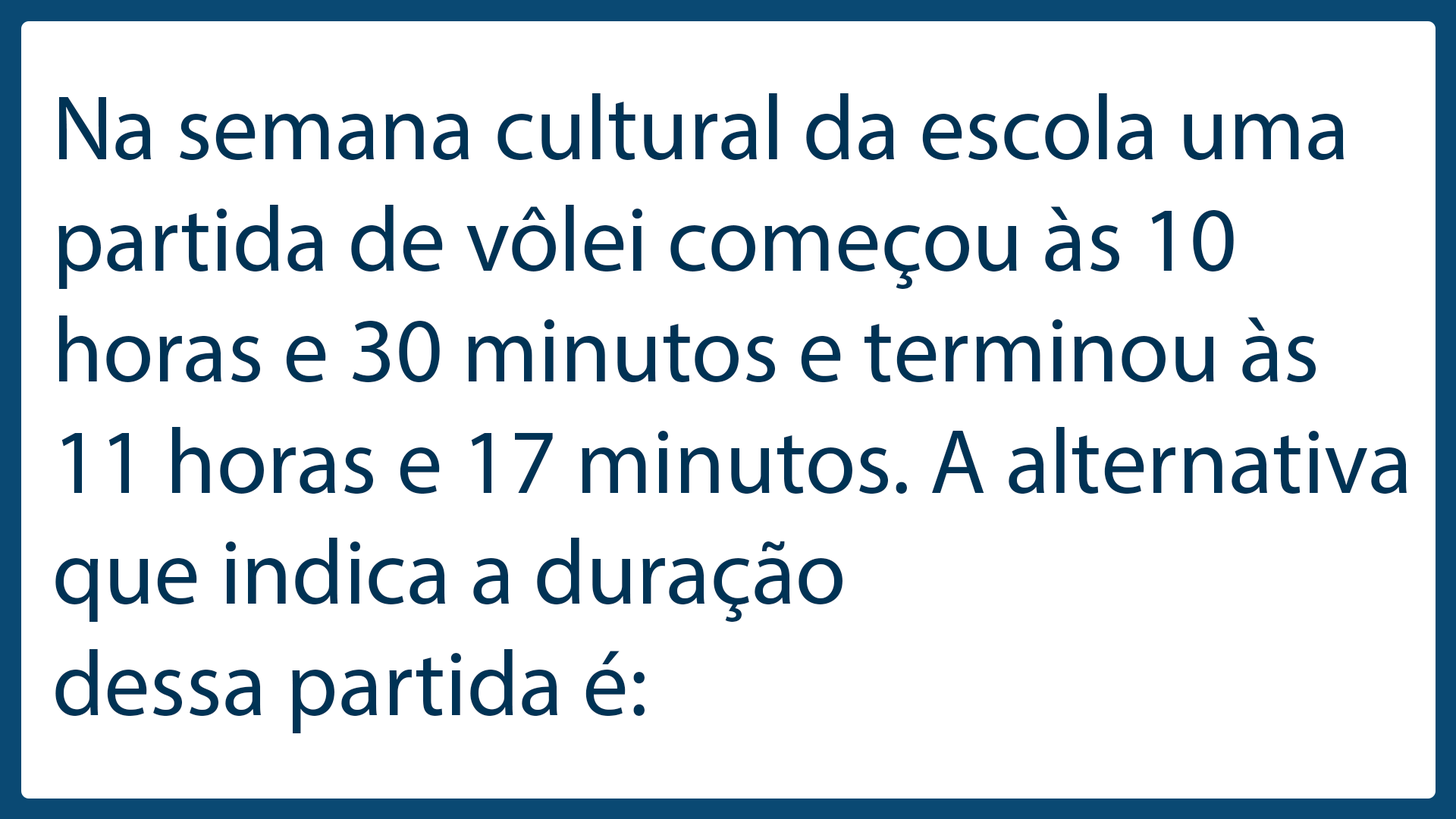
<style>
.page{position:relative;width:1456px;height:819px;background:#ffffff}
.page>*{position:absolute;margin:0}
.t1{font:92.6px "MyriadPro-Regular";color:#003355}
</style>
<div class="page">
<p class="t1" style="left:55px;top:93px;width:1352px;height:640px">Na semana cultural da escola uma partida de vôlei começou às 10 horas e 30 minutos e terminou às 11 horas e 17 minutos. A alternativa que indica a duração<br>dessa partida é:</p>
</div>
